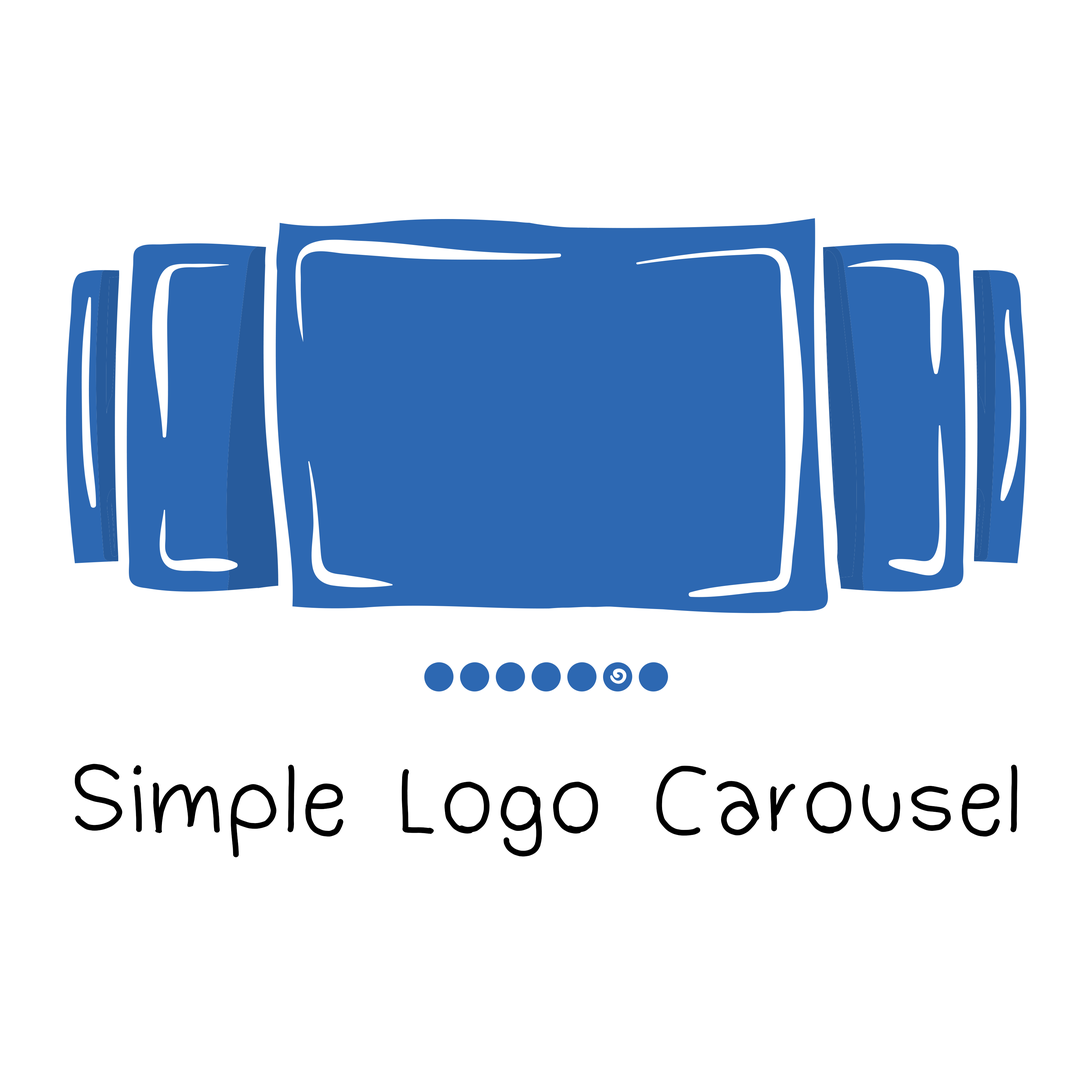
<style>
.page{position:relative;width:1092px;height:1092px;background:#ffffff}
.page>*{position:absolute;margin:0}
.t1{font:104.5px "Dudu_Calligraphy";color:#000000}
</style>
<div class="page">
<p class="t1" style="left:75px;top:764px;width:942px;height:93px">Simple Logo Carousel</p>
</div>
